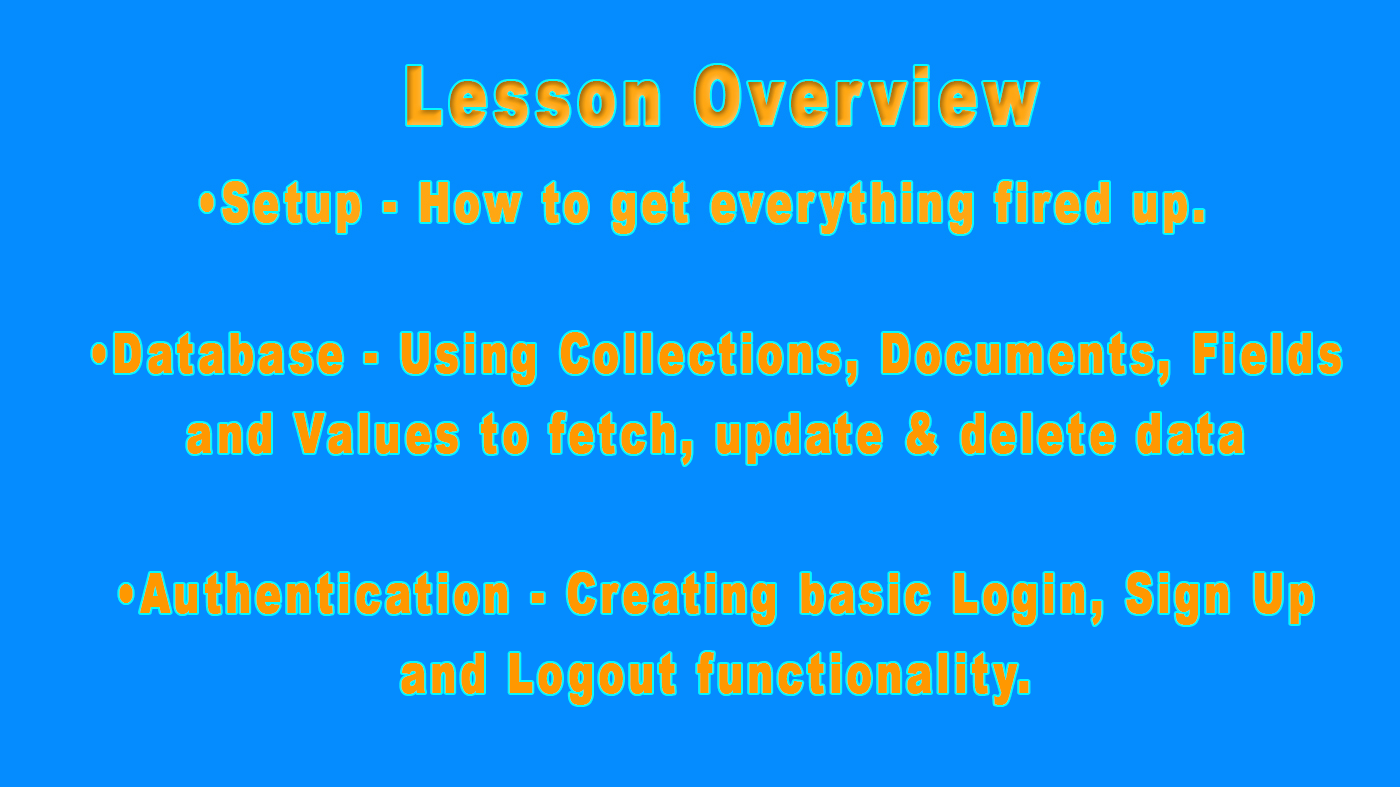
<style>
.page{position:relative;width:1400px;height:787px;background:#058cff}
.page>*{position:absolute;margin:0}
.t1{font:53.8px/80px "Arial-Black";letter-spacing:0.1em;color:#ff9800;font-weight:bold;scale:0.71 1}
</style>
<div class="page">
<p class="t1" style="left:92px;top:332px;width:1249px;height:373px;text-align:center">•Database - Using Collections, Documents, Fields and Values to fetch, update &amp; delete data<br><br>•Authentication - Creating basic Login, Sign Up and Logout functionality.</p>
</div>
